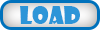
<style>
.page{position:relative;width:100px;height:30px;background:#2d95d8}
.page>*{position:absolute;margin:0}
.t1{font:24px "ShowcardGothic-Reg";color:#2d95d8}
</style>
<div class="page">
<p class="t1" style="left:20px;top:6px;width:60px;height:19px">load</p>
</div>
